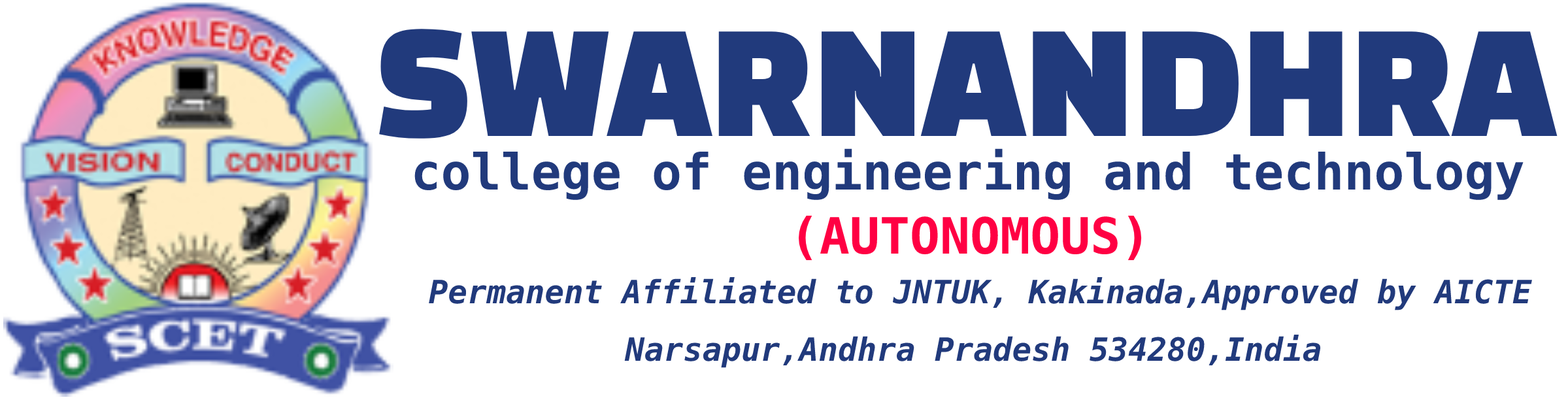
<style>
.page{position:relative;width:1568px;height:400px;background:#ffffff}
.page>*{position:absolute;margin:0}
.t1{font:139.3px "BlackHanSans-Regular";color:#213a7c}
.t2{font:50px "BitstreamVeraSansMono-Bold";color:#213a7c}
.t3{font:50px "BitstreamVeraSansMono-Bold";color:#ff0043}
.t4{font:32.1px "BitstreamVeraSansMono-BoldOb";color:#213a7c}
</style>
<div class="page">
<p class="t1" style="left:379px;top:29px;width:1179px;height:110px">SWARNANDHRA</p>
<p class="t2" style="left:414px;top:148px;width:1110px;height:52px">college of engineering and technology</p>
<p class="t3" style="left:799px;top:215px;width:343px;height:46px">(AUTONOMOUS)</p>
<p class="t4" style="left:429px;top:277px;width:1103px;height:33px">Permanent Affiliated to JNTUK, Kakinada,Approved by AICTE</p>
<p class="t4" style="left:624px;top:335px;width:697px;height:33px">Narsapur,Andhra Pradesh 534280,India</p>
</div>
